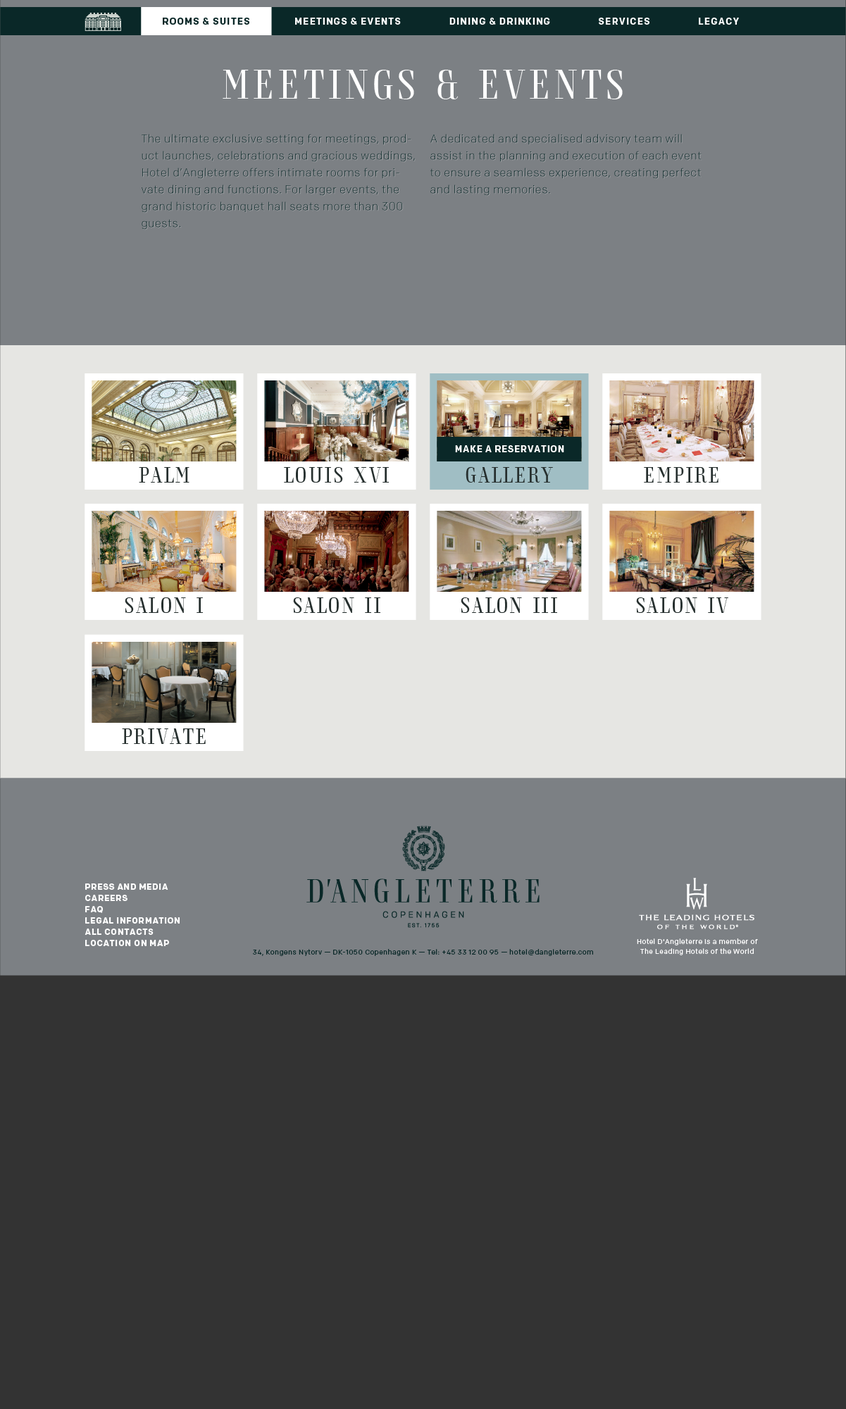
<style>
.page{position:relative;width:846px;height:1409px;background:#7c8084}
.page>*{position:absolute;margin:0}
.t1{font:9.2px "Chrono-Bold";letter-spacing:0.09em;color:#0a2828}
.t2{font:9.2px "Chrono-Bold";letter-spacing:0.09em;color:#ffffff}
.t3{font:42.3px "DAngleterre";letter-spacing:0.06em;color:#ffffff}
.t4{font:9.2px "Chrono-Bold";letter-spacing:0.05em;color:#ffffff}
.t5{font:22.5px "DAngleterre";letter-spacing:0.05em;color:#262f2e}
.t6{font:8.5px/11.3px "Chrono-Bold";letter-spacing:0.05em;color:#ffffff;text-transform:uppercase}
.t7{font:7px/9.9px "Chrono-Regular";letter-spacing:0.05em;color:#ffffff}
.t8{font:7px "Chrono-Regular";letter-spacing:0.05em;color:#0a2828}
</style>
<div class="page">
<p class="t1" style="left:163px;top:18px;width:86px;height:7px">ROOMS &amp; SUITES</p>
<p class="t2" style="left:295px;top:18px;width:106px;height:7px">MEETINGS &amp; EVENTS</p>
<p class="t2" style="left:450px;top:18px;width:100px;height:7px">DINING &amp; DRINKING</p>
<p class="t2" style="left:599px;top:18px;width:51px;height:7px">SERVICES</p>
<p class="t2" style="left:699px;top:18px;width:40px;height:7px">LEGACY</p>
<p class="t3" style="left:223px;top:70px;width:400px;height:29px">MEETINGS &amp; EVENTS</p>
<p class="t4" style="left:455px;top:445px;width:109px;height:7px">MAKE A RESERVATION</p>
<p class="t5" style="left:139px;top:467px;width:51px;height:16px">PALM COURT</p>
<p class="t5" style="left:284px;top:467px;width:105px;height:16px">LOUIS XVI</p>
<p class="t5" style="left:466px;top:467px;width:87px;height:16px">GALLERY</p>
<p class="t5" style="left:644px;top:467px;width:75px;height:16px">EMPIRE</p>
<p class="t5" style="left:125px;top:597px;width:78px;height:16px">SALON I</p>
<p class="t5" style="left:293px;top:597px;width:87px;height:16px">SALON II</p>
<p class="t5" style="left:461px;top:597px;width:96px;height:16px">SALON III</p>
<p class="t5" style="left:636px;top:597px;width:93px;height:16px">SALON IV</p>
<p class="t5" style="left:122px;top:729px;width:84px;height:15px">PRIVATE DINING</p>
<p class="t6" style="left:85px;top:884px;width:95px;height:62px">Press and media<br>Careers<br>FAQ<br>Legal information<br>All contacts<br>location on map</p>
<p class="t7" style="left:637px;top:939px;width:121px;height:16px;text-align:center">Hotel D'Angleterre is a member of <br>The Leading Hotels of the World</p>
<p class="t8" style="left:253px;top:949px;width:340px;height:7px">34, Kongens Nytorv — DK-1050 Copenhagen K — Tel: +45 33 12 00 95 — hotel@dangleterre.com</p>
</div>
